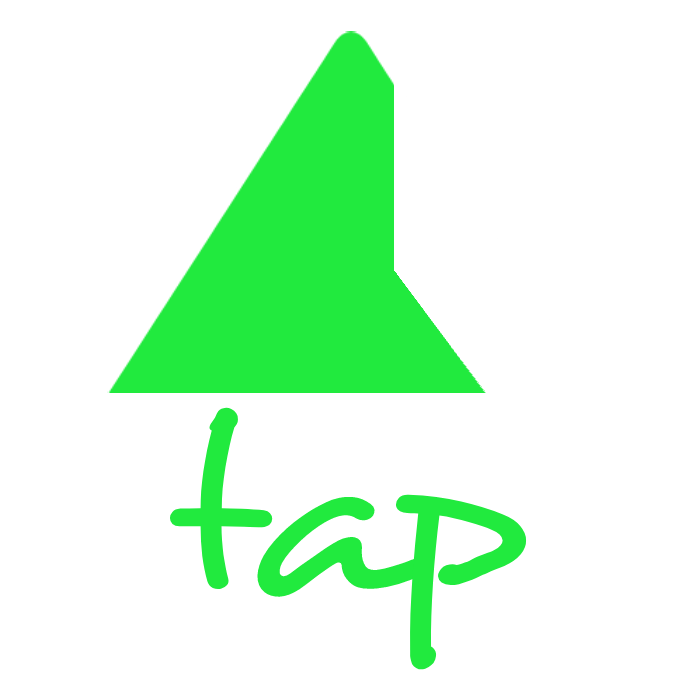
<style>
.page{position:relative;width:700px;height:700px;background:#ffffff}
.page>*{position:absolute;margin:0}
.t1{font:240.1px "Desyrel";color:#21ea3e;scale:1.16 1}
</style>
<div class="page">
<p class="t1" style="left:170px;top:407px;width:357px;height:263px">tap</p>
</div>
